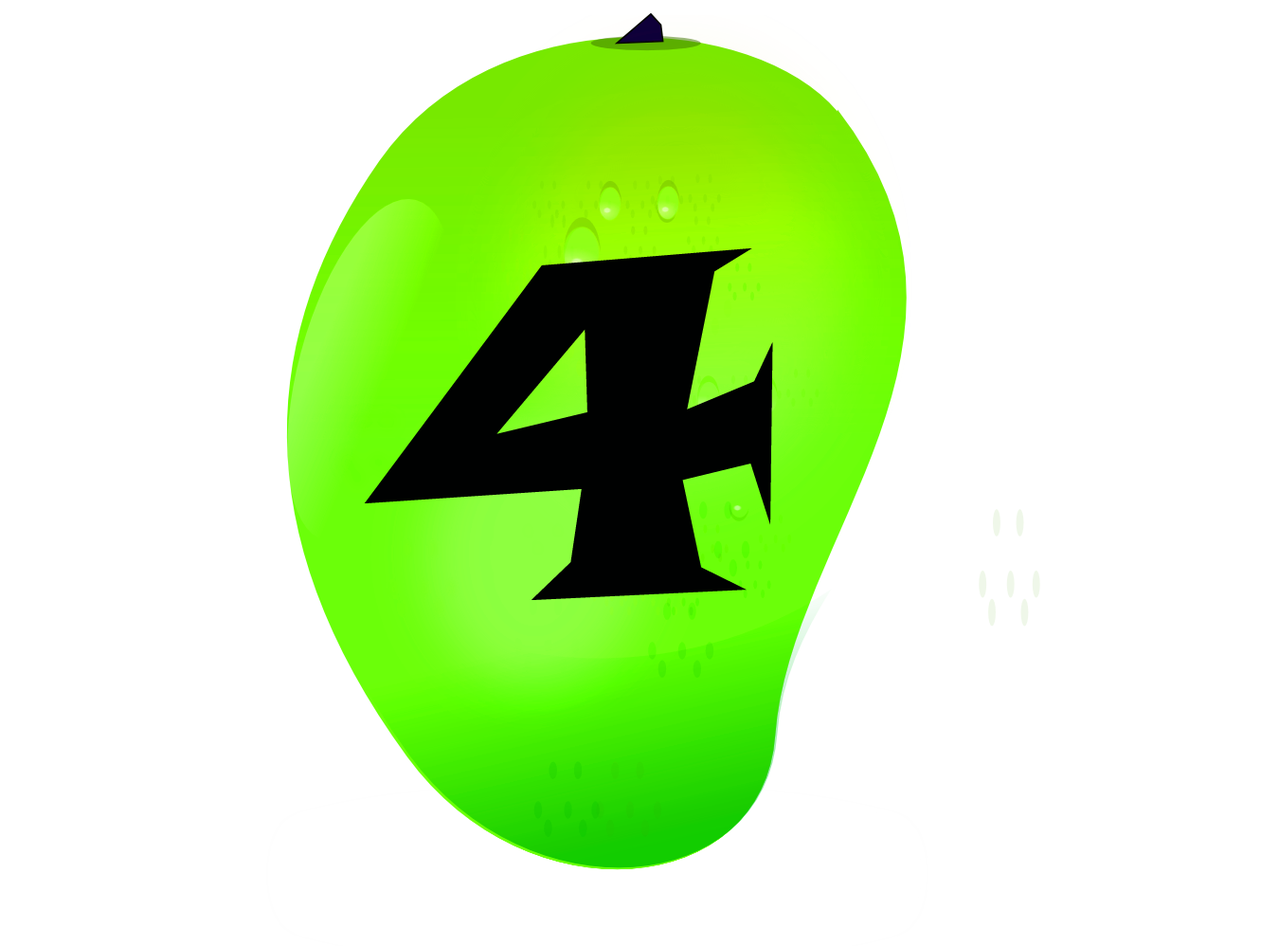
<style>
.page{position:relative;width:1261px;height:946px;background:#ffffff}
.page>*{position:absolute;margin:0}
.t1{font:473.7px "SnapITC-Regular";color:#000101}
</style>
<div class="page">
<p class="t1" style="left:364px;top:248px;width:409px;height:352px">4</p>
</div>
